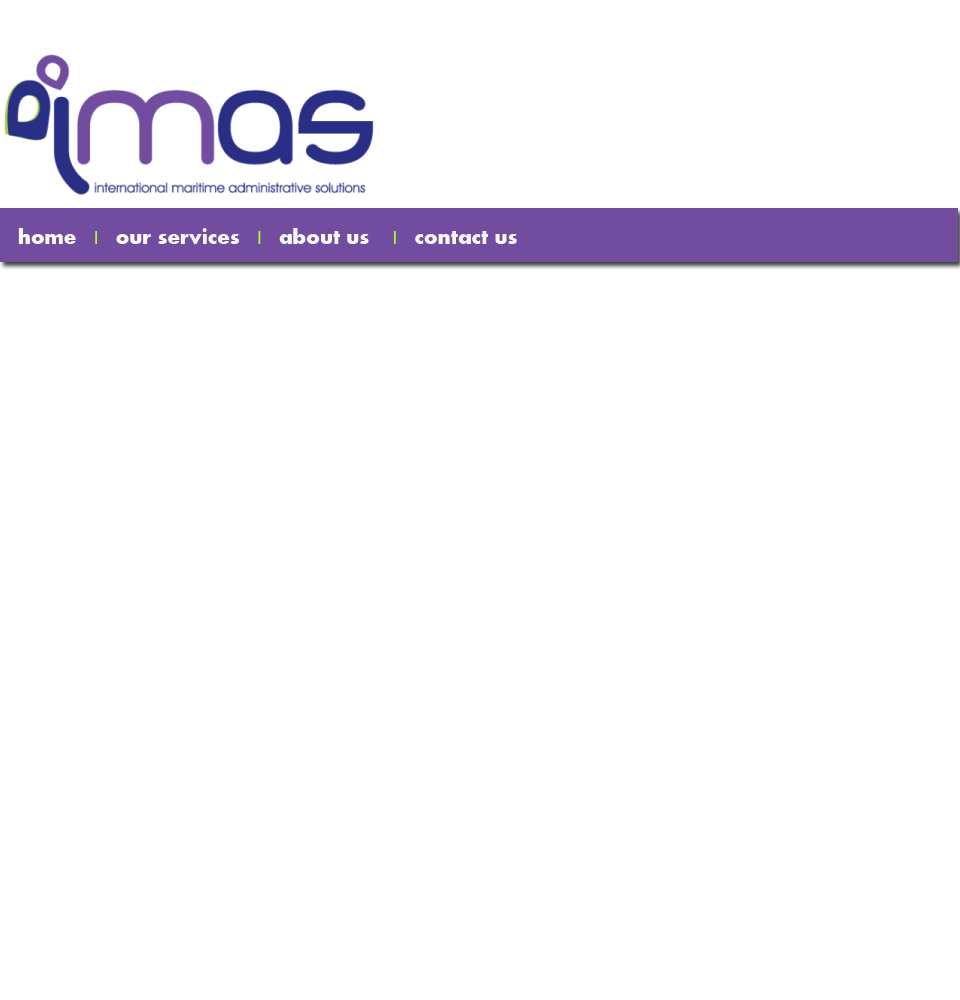
<style>
.page{position:relative;width:960px;height:1000px;background:#ffffff}
.page>*{position:absolute;margin:0}
.t1{font:22px "Aharoni-Bold";color:#f8f7fa}
.t2{font:22px "Aharoni-Bold";color:#adff2f}
</style>
<div class="page">
<p class="t1" style="left:18px;top:228px;width:499px;height:16px">home  <span class="t2"> |</span>   our services   <span class="t2">|</span>   about us    <span class="t2">|</span>   contact us</p>
</div>
